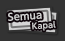
<style>
.page{position:relative;width:65px;height:41px;background:#333333}
.page>*{position:absolute;margin:0}
.t1{font:10px/10px "UDShinGoPro-DeBold";color:#d2d2d2}
.t2{font:8px/10px "UDShinGoPro-DeBold";color:#d2d2d2}
</style>
<div class="page">
<p class="t1" style="left:8px;top:12px;width:48px;height:19px;text-align:center;rotate:-4deg">Semua<br><span class="t2"> Kapal</span></p>
</div>
